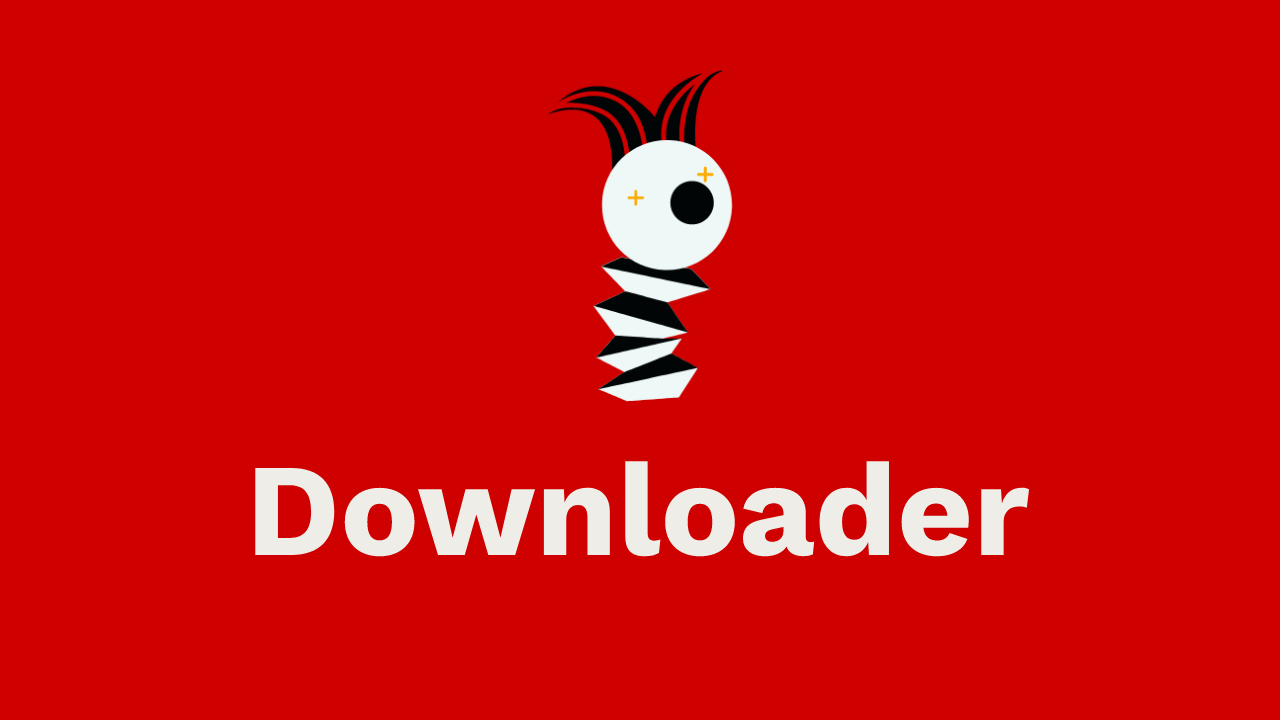
<style>
.page{position:relative;width:1280px;height:720px;background:#ce0000}
.page>*{position:absolute;margin:0}
.t1{font:131.7px "WorkSans-Bold";color:#efede8}
</style>
<div class="page">
<p class="t1" style="left:255px;top:461px;width:775px;height:96px">Downloader</p>
</div>
